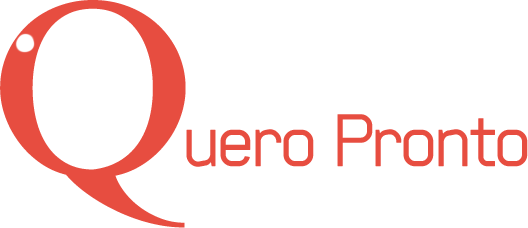
<style>
.page{position:relative;width:528px;height:228px;background:#ffffff}
.page>*{position:absolute;margin:0}
.t1{font:72px "Baksheesh";letter-spacing:-0.05em;color:#e74d40}
</style>
<div class="page">
<p class="t1" style="left:186px;top:114px;width:342px;height:53px">uero Pronto</p>
</div>
